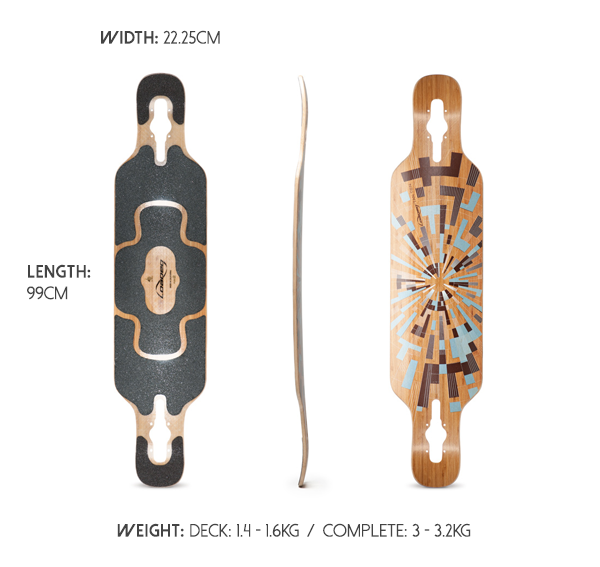
<style>
.page{position:relative;width:600px;height:567px;background:#ffffff}
.page>*{position:absolute;margin:0}
.t1{font:18px "DolceVita";letter-spacing:0.03em;color:#444444}
.t2{font:18px "DolceVitaHeavy-Bold";letter-spacing:0.03em;color:#444444}
</style>
<div class="page">
<p class="t1" style="left:101px;top:30px;width:119px;height:14px"><span class="t2">Width: </span>22.25cm</p>
<p class="t2" style="left:27px;top:264px;width:64px;height:36px">Length: <br><span class="t1">99cm</span></p>
<p class="t1" style="left:117px;top:523px;width:354px;height:14px"><span class="t2">Weight: </span>Deck: 1.4 - 1.6kg  /  Complete: 3 - 3.2kg</p>
</div>
